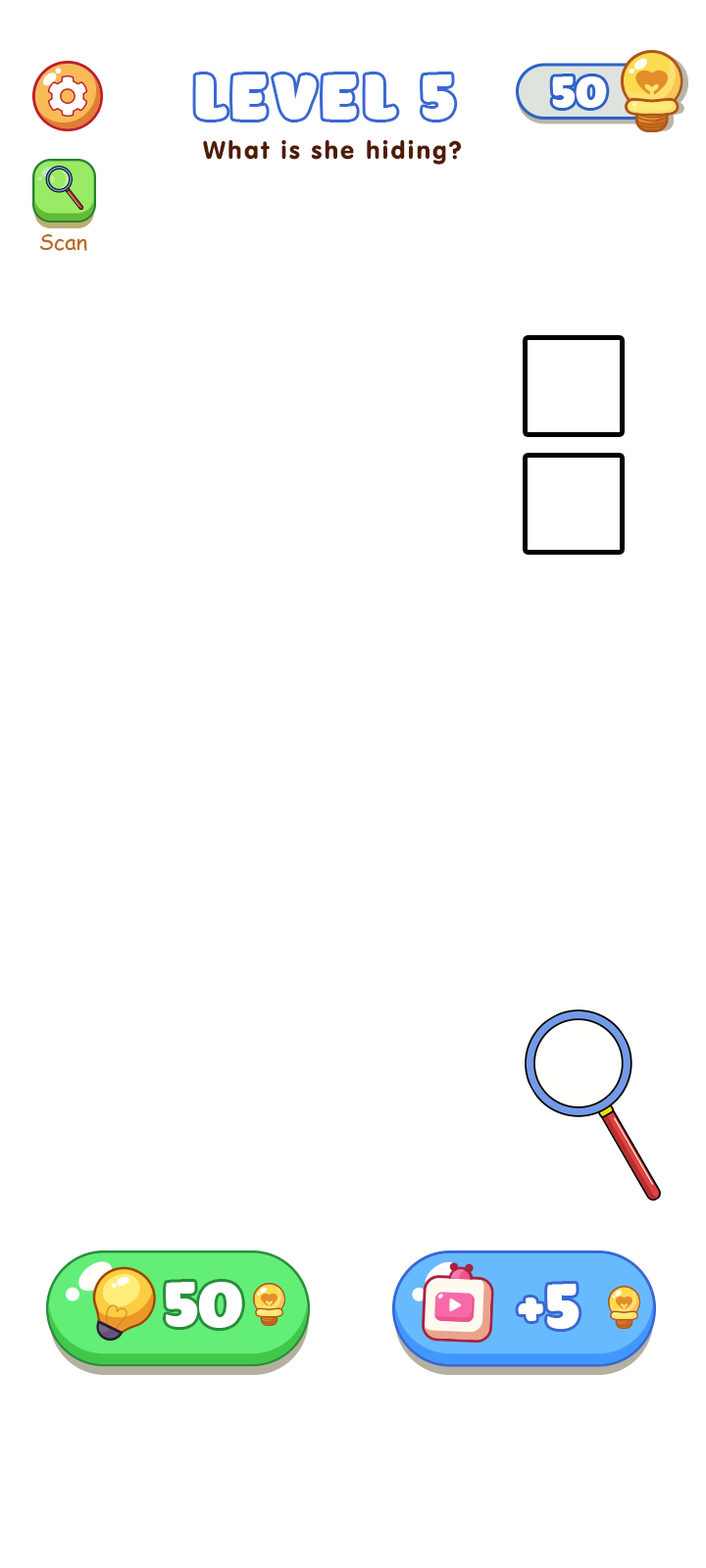
<style>
.page{position:relative;width:706px;height:1568px;background:#ffffff}
.page>*{position:absolute;margin:0}
.t1{font:64.9px "iCielPony";letter-spacing:0.08em;color:#ffffff}
.t2{font:44.9px "iCielPony";color:#ffffff}
.t3{font:24.5px "Socnhi";letter-spacing:0.08em;color:#501c00}
.t4{font:21.8px "ComicSansMS";color:#b96c27}
.t5{font:64.9px "iCielPony";color:#ffffff}
</style>
<div class="page">
<p class="t1" style="left:195px;top:74px;width:260px;height:46px">LEVEL 5</p>
<p class="t2" style="left:552px;top:76px;width:55px;height:32px">50</p>
<p class="t3" style="left:203px;top:140px;width:258px;height:25px">What is she hiding?</p>
<p class="t4" style="left:40px;top:234px;width:47px;height:17px">Scan</p>
<p class="t5" style="left:166px;top:1282px;width:76px;height:46px">50</p>
<p class="t5" style="left:517px;top:1284px;width:62px;height:45px">+5</p>
</div>
